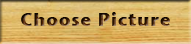
<style>
.page{position:relative;width:191px;height:44px}
.page>*{position:absolute;margin:0}
.t1{font:18px "StoneSansITC-Bold";letter-spacing:0.05em}
</style>
<div class="page">
<p class="t1" style="left:21px;top:12px;width:149px;height:14px">Choose Picture</p>
</div>
